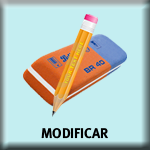
<style>
.page{position:relative;width:150px;height:150px;background:#c4eef1}
.page>*{position:absolute;margin:0}
.t1{font:14px "MetaBoldLF-Roman";color:#000000}
</style>
<div class="page">
<p class="t1" style="left:41px;top:128px;width:67px;height:11px">MODIFICAR</p>
</div>
